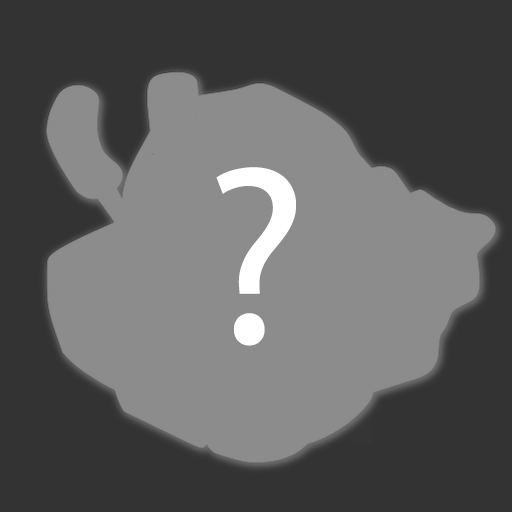
<style>
.page{position:relative;width:512px;height:512px;background:#333333}
.page>*{position:absolute;margin:0}
.t1{font:256px "MyriadPro-Regular";letter-spacing:-0.005em;color:#ffffff}
</style>
<div class="page">
<p class="t1" style="left:216px;top:167px;width:80px;height:179px">?</p>
</div>
